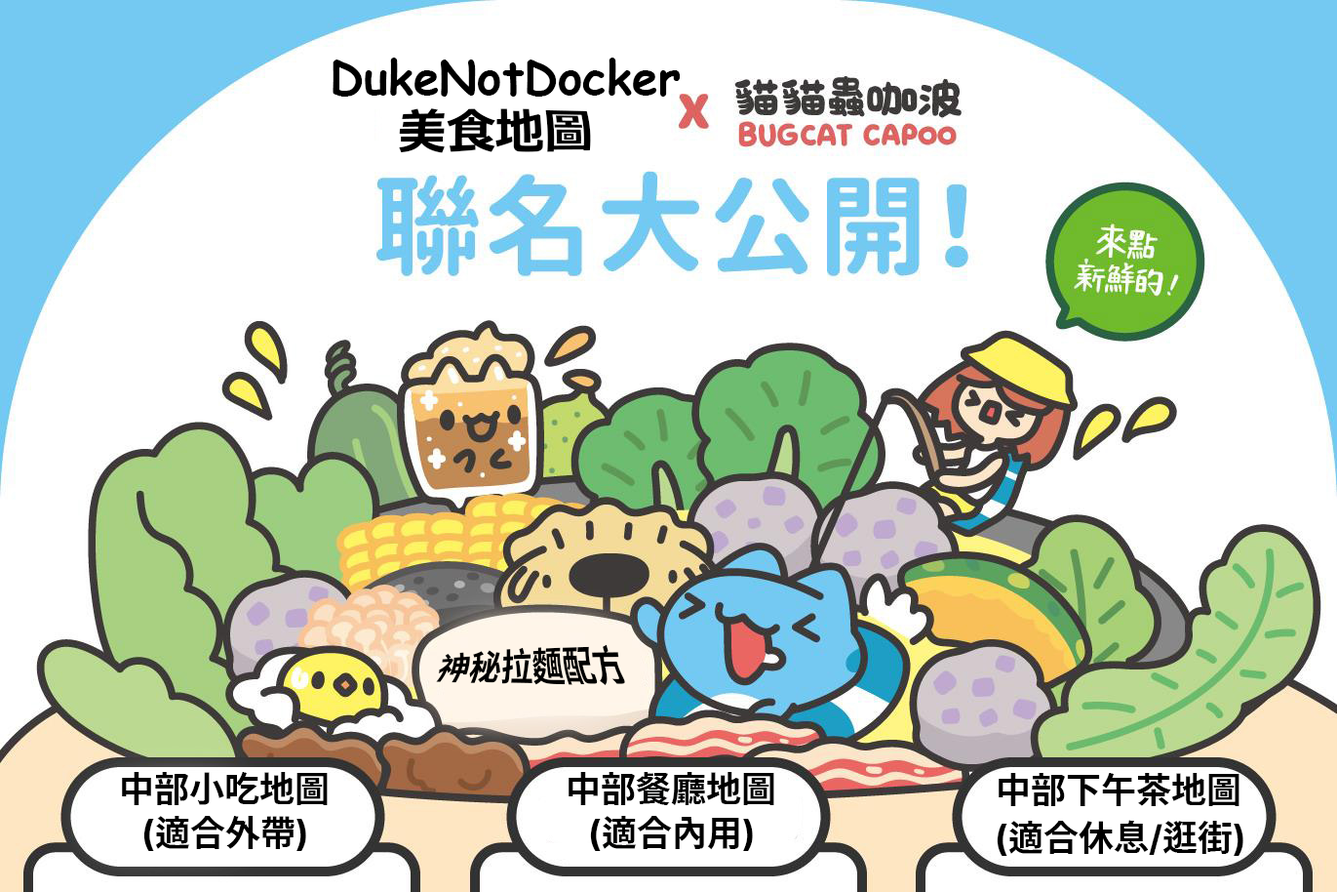
<style>
.page{position:relative;width:1337px;height:892px;background:#ffffff}
.page>*{position:absolute;margin:0}
.t1{font:46.8px "ComicSansMS-Bold";color:#000000}
.t2{font:46.8px "MeiryoUI-Bold";color:#000000}
.t3{font:35.1px "Sarasa-Mono-TC-Bold";color:#000000}
.t4{font:35.1px "Sarasa-Gothic-K-Bold";color:#000000}
</style>
<div class="page">
<p class="t1" style="left:333px;top:58px;width:348px;height:39px">DukeNotDocker</p>
<p class="t2" style="left:399px;top:108px;width:192px;height:45px">美食地圖</p>
<p class="t3" style="left:436px;top:644px;width:189px;height:42px">神秘拉麵配方</p>
<p class="t4" style="left:122px;top:772px;width:206px;height:33px">中部小吃地圖</p>
<p class="t4" style="left:569px;top:772px;width:206px;height:33px">中部餐廳地圖</p>
<p class="t4" style="left:999px;top:773px;width:241px;height:33px">中部下午茶地圖</p>
<p class="t4" style="left:143px;top:816px;width:163px;height:35px">(適合外帶)</p>
<p class="t4" style="left:590px;top:816px;width:163px;height:35px">(適合內用)</p>
<p class="t4" style="left:997px;top:819px;width:247px;height:37px">(適合休息/逛街)</p>
</div>
